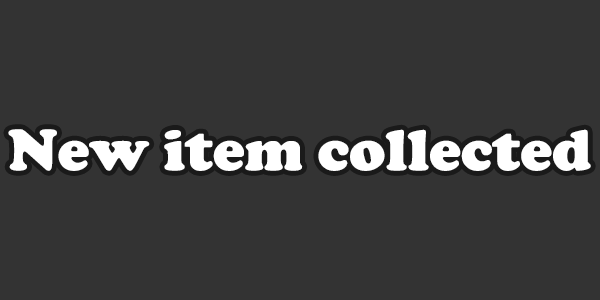
<style>
.page{position:relative;width:600px;height:300px;background:#333333}
.page>*{position:absolute;margin:0}
.t1{font:60px "CooperBlack";color:#ffffff}
</style>
<div class="page">
<p class="t1" style="left:8px;top:129px;width:583px;height:42px">New item collected</p>
</div>
